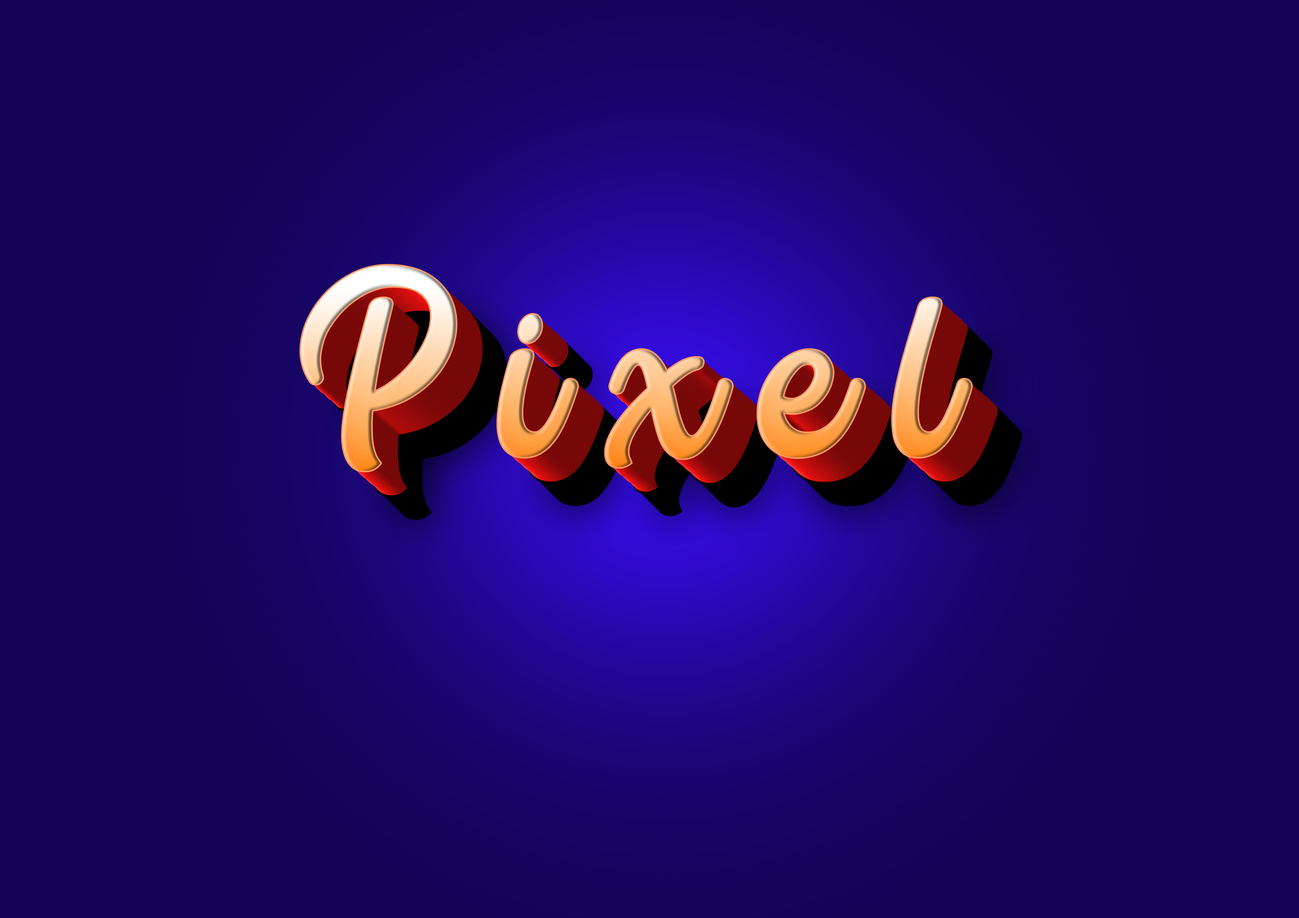
<style>
.page{position:relative;width:1299px;height:918px}
.page>*{position:absolute;margin:0}
.t1{font:231.4px "ThankYouSoMuch";letter-spacing:0.2em}
</style>
<div class="page">
<p class="t1" style="left:301px;top:265px;width:670px;height:206px">Pixel</p>
<p class="t1" style="left:301px;top:265px;width:670px;height:206px">Pixel</p>
<p class="t1" style="left:302px;top:267px;width:670px;height:205px">Pixel</p>
<p class="t1" style="left:303px;top:268px;width:670px;height:205px">Pixel</p>
<p class="t1" style="left:304px;top:269px;width:670px;height:205px">Pixel</p>
<p class="t1" style="left:305px;top:270px;width:671px;height:205px">Pixel</p>
<p class="t1" style="left:306px;top:271px;width:671px;height:205px">Pixel</p>
<p class="t1" style="left:306px;top:271px;width:671px;height:205px">Pixel</p>
<p class="t1" style="left:307px;top:272px;width:671px;height:206px">Pixel</p>
<p class="t1" style="left:308px;top:273px;width:671px;height:206px">Pixel</p>
<p class="t1" style="left:310px;top:274px;width:670px;height:206px">Pixel</p>
<p class="t1" style="left:311px;top:275px;width:670px;height:206px">Pixel</p>
<p class="t1" style="left:312px;top:275px;width:670px;height:206px">Pixel</p>
<p class="t1" style="left:313px;top:277px;width:670px;height:205px">Pixel</p>
<p class="t1" style="left:314px;top:278px;width:670px;height:205px">Pixel</p>
<p class="t1" style="left:316px;top:280px;width:671px;height:205px">Pixel</p>
<p class="t1" style="left:317px;top:281px;width:671px;height:205px">Pixel</p>
<p class="t1" style="left:318px;top:282px;width:671px;height:206px">Pixel</p>
<p class="t1" style="left:320px;top:282px;width:670px;height:206px">Pixel</p>
<p class="t1" style="left:321px;top:283px;width:670px;height:206px">Pixel</p>
<p class="t1" style="left:322px;top:284px;width:670px;height:206px">Pixel</p>
<p class="t1" style="left:323px;top:285px;width:670px;height:206px">Pixel</p>
<p class="t1" style="left:324px;top:287px;width:670px;height:205px">Pixel</p>
<p class="t1" style="left:325px;top:288px;width:671px;height:205px">Pixel</p>
<p class="t1" style="left:326px;top:289px;width:671px;height:205px">Pixel</p>
<p class="t1" style="left:327px;top:292px;width:671px;height:206px">Pixel</p>
<p class="t1" style="left:327px;top:290px;width:671px;height:205px">Pixel</p>
<p class="t1" style="left:329px;top:292px;width:671px;height:206px">Pixel</p>
<p class="t1" style="left:329px;top:292px;width:671px;height:206px">Pixel</p>
<p class="t1" style="left:331px;top:293px;width:670px;height:206px">Pixel</p>
<p class="t1" style="left:332px;top:294px;width:670px;height:206px">Pixel</p>
<p class="t1" style="left:333px;top:295px;width:670px;height:206px">Pixel</p>
<p class="t1" style="left:334px;top:297px;width:670px;height:205px">Pixel</p>
<p class="t1" style="left:335px;top:298px;width:671px;height:205px">Pixel</p>
<p class="t1" style="left:336px;top:299px;width:671px;height:205px">Pixel</p>
<p class="t1" style="left:336px;top:299px;width:671px;height:205px">Pixel</p>
<p class="t1" style="left:337px;top:300px;width:671px;height:205px">Pixel</p>
<p class="t1" style="left:338px;top:301px;width:671px;height:205px">Pixel</p>
<p class="t1" style="left:339px;top:302px;width:671px;height:206px">Pixel</p>
<p class="t1" style="left:341px;top:303px;width:670px;height:206px">Pixel</p>
<p class="t1" style="left:342px;top:304px;width:670px;height:206px">Pixel</p>
<p class="t1" style="left:342px;top:304px;width:670px;height:206px">Pixel</p>
<p class="t1" style="left:343px;top:305px;width:670px;height:206px">Pixel</p>
<p class="t1" style="left:344px;top:307px;width:670px;height:205px">Pixel</p>
<p class="t1" style="left:346px;top:309px;width:671px;height:205px">Pixel</p>
<p class="t1" style="left:347px;top:310px;width:671px;height:205px">Pixel</p>
<p class="t1" style="left:348px;top:311px;width:671px;height:205px">Pixel</p>
<p class="t1" style="left:349px;top:312px;width:671px;height:206px">Pixel</p>
<p class="t1" style="left:351px;top:313px;width:670px;height:206px">Pixel</p>
<p class="t1" style="left:352px;top:314px;width:670px;height:206px">Pixel</p>
</div>
